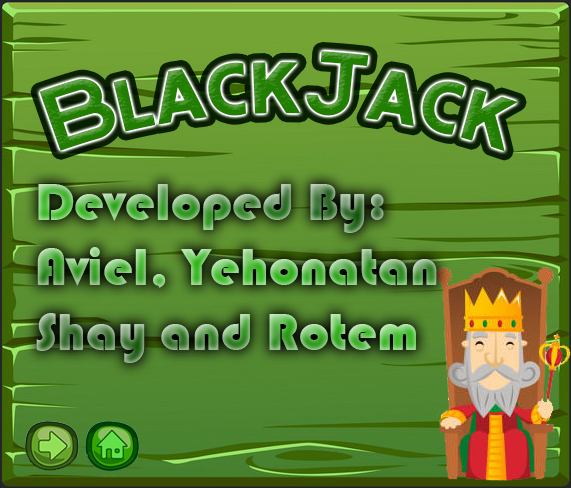
<style>
.page{position:relative;width:571px;height:488px}
.page>*{position:absolute;margin:0}
.t1{font:54.2px "Bauhaus93"}
</style>
<div class="page">
<p class="t1" style="left:36px;top:184px;width:401px;height:179px">Developed By:<br>Aviel, Yehonatan<br>Shay and Rotem</p>
</div>
